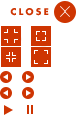
<style>
.page{position:relative;width:76px;height:119px;background:#ffffff}
.page>*{position:absolute;margin:0}
.t1{font:9px "Futura-Bold";letter-spacing:0.26em;color:#ce3502}
</style>
<div class="page">
<p class="t1" style="left:10px;top:8px;width:39px;height:8px">CLOSE</p>
</div>
